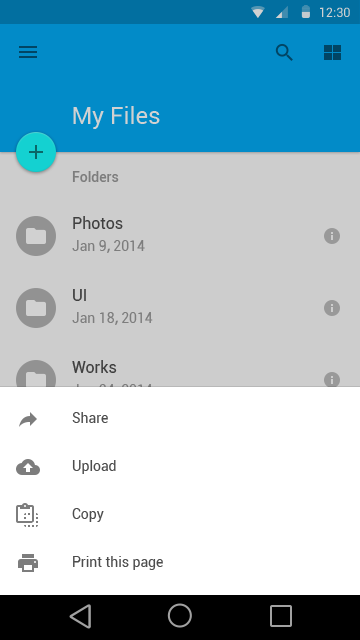
<style>
.page{position:relative;width:360px;height:640px;background:#cdcdcd}
.page>*{position:absolute;margin:0}
.t1{font:12.7px "Roboto-Regular";color:#d1d1d1}
.t2{font:24px "Roboto-Regular";color:#d1d1d1}
.t3{font:14px "Roboto-Medium";color:#7d7d7d}
.t4{font:16px "Roboto-Regular";color:#4d4d4d}
.t5{font:14px "Roboto-Regular";color:#7d7d7d}
.t6{font:14px "AdobeHeitiStd-Regular";color:#7d7d7d}
.t7{font:14px "Roboto-Regular";color:#4d4d4d}
</style>
<div class="page">
<p class="t1" style="left:320px;top:7px;width:30px;height:10px">12:30</p>
<p class="t2" style="left:73px;top:106px;width:87px;height:23px">My Files</p>
<p class="t3" style="left:72px;top:171px;width:47px;height:11px">Folders</p>
<p class="t4" style="left:73px;top:216px;width:50px;height:13px">Photos</p>
<p class="t5" style="left:72px;top:240px;width:73px;height:13px">Jan 9<span class="t6">, </span>2014</p>
<p class="t4" style="left:73px;top:289px;width:13px;height:12px">UI</p>
<p class="t5" style="left:72px;top:312px;width:81px;height:13px">Jan 18<span class="t6">, </span>2014</p>
<p class="t4" style="left:72px;top:360px;width:45px;height:13px">Works</p>
<p class="t7" style="left:72px;top:412px;width:36px;height:11px">Share</p>
<p class="t7" style="left:72px;top:460px;width:44px;height:14px">Upload</p>
<p class="t7" style="left:72px;top:508px;width:32px;height:14px">Copy</p>
<p class="t7" style="left:73px;top:556px;width:90px;height:14px">Print this page</p>
</div>
